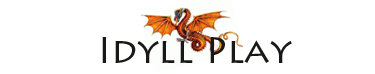
<style>
.page{position:relative;width:375px;height:74px;background:#ffffff}
.page>*{position:absolute;margin:0}
.t1{font:36px "LithosPro-Regular";color:#191816}
</style>
<div class="page">
<p class="t1" style="left:102px;top:37px;width:190px;height:26px">Idyll Play</p>
</div>
